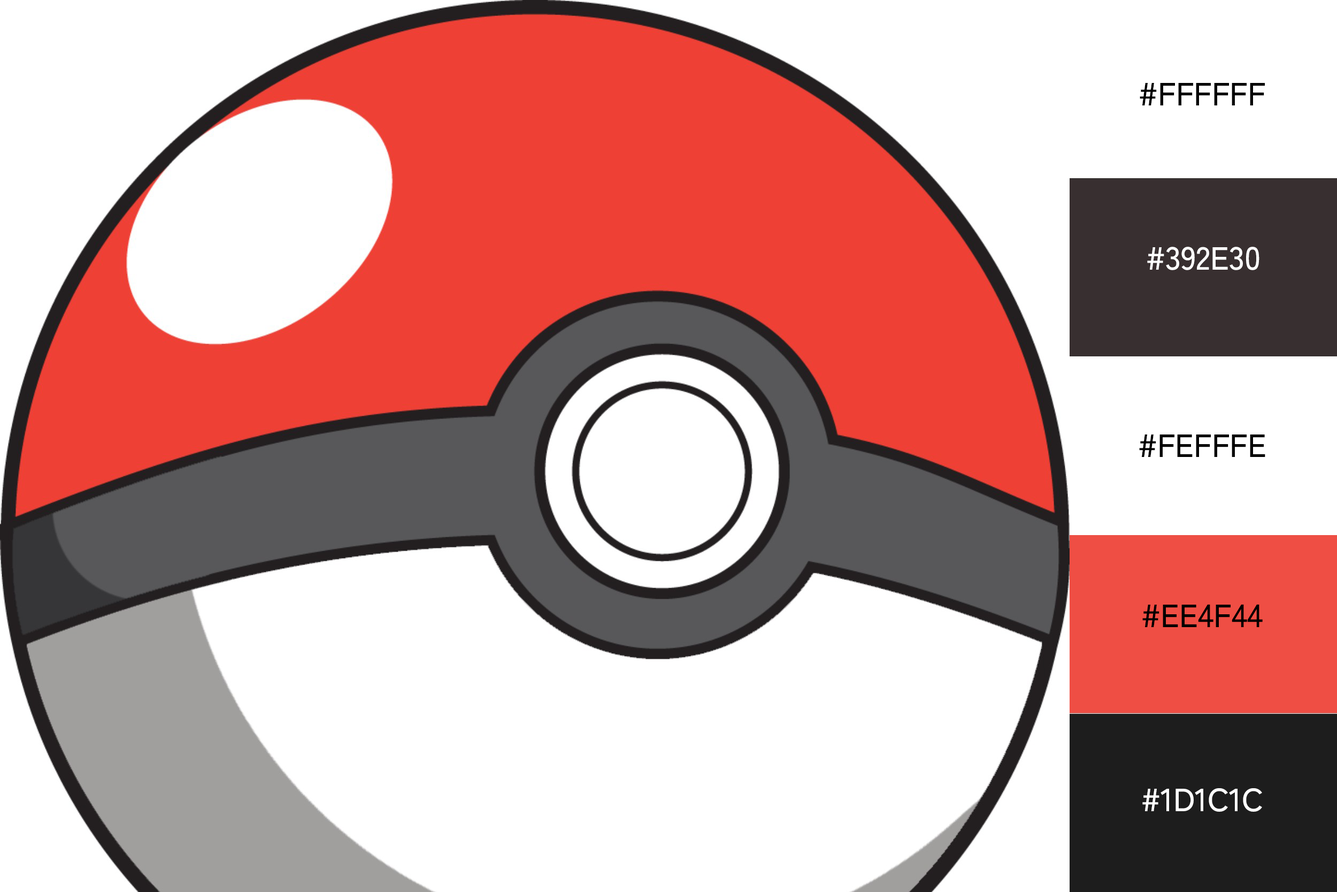
<style>
.page{position:relative;width:1337px;height:892px;background:#ffffff}
.page>*{position:absolute;margin:0}
.t1{font:32.1px "ZenKakuGothicNew-Medium";color:#000000}
.t2{font:32.1px "ZenKakuGothicNew-Medium";color:#ffffff}
</style>
<div class="page">
<p class="t1" style="left:1140px;top:83px;width:125px;height:22px">#FFFFFF</p>
<p class="t2" style="left:1147px;top:247px;width:113px;height:23px">#392E30</p>
<p class="t1" style="left:1139px;top:434px;width:127px;height:23px">#FEFFFE</p>
<p class="t1" style="left:1143px;top:604px;width:120px;height:23px">#EE4F44</p>
<p class="t2" style="left:1143px;top:788px;width:119px;height:23px">#1D1C1C</p>
</div>
